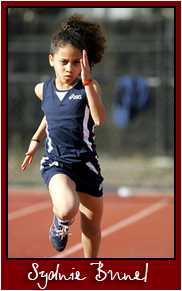
<style>
.page{position:relative;width:182px;height:291px}
.page>*{position:absolute;margin:0}
.t1{font:24px "BetinaScript";color:#ffffff}
</style>
<div class="page">
<p class="t1" style="left:27px;top:261px;width:121px;height:28px">Sydnie Bunel</p>
</div>
